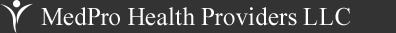
<style>
.page{position:relative;width:396px;height:33px;background:#333333}
.page>*{position:absolute;margin:0}
.t1{font:25.5px "TimesNewRomanPSMT";color:#ffffff}
</style>
<div class="page">
<p class="t1" style="left:41px;top:7px;width:310px;height:19px">MedPro Health Providers LLC</p>
</div>
